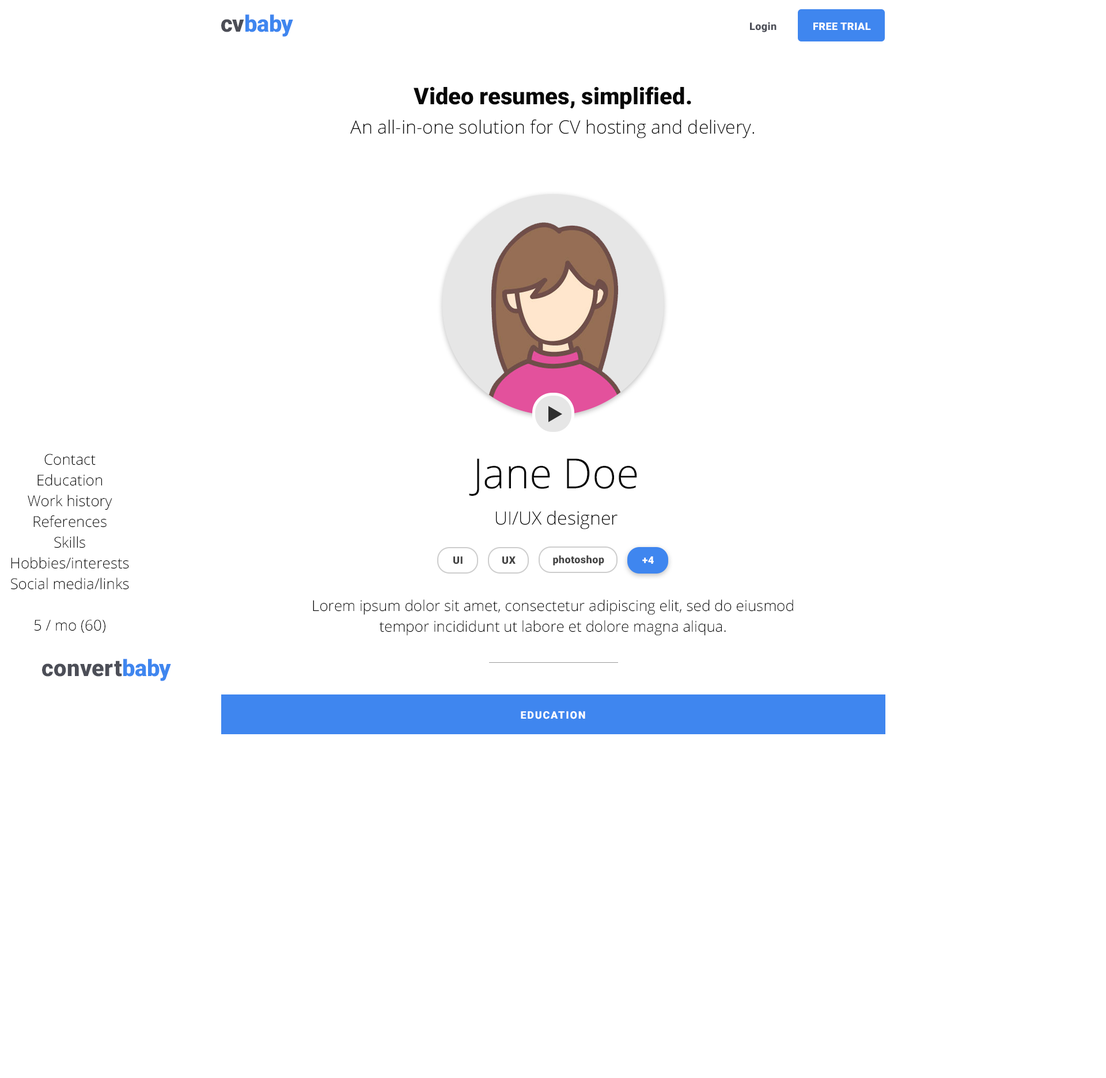
<style>
.page{position:relative;width:1106px;height:1078px;background:#ffffff}
.page>*{position:absolute;margin:0}
.t1{font:22.9px "Roboto-Black";letter-spacing:0.01em;color:#3f86ef}
.t2{font:22.9px "Roboto-Black";letter-spacing:0.01em;color:#4c4e57}
.t3{font:10.4px "Roboto-Black";letter-spacing:0.025em;color:#4c4e57}
.t4{font:10.4px "Roboto-Black";letter-spacing:0.025em;color:#ffffff}
.t5{font:23px "Roboto-Black";color:#070707}
.t6{font:18.4px "OpenSans-Light";color:#070707}
.t7{font:15px/20.7px "OpenSans-Light";color:#070707}
.t8{font:41.5px "OpenSans-Light";color:#070707}
.t9{font:10.4px "Roboto-Black";letter-spacing:0.025em;color:#444444}
.t10{font:10.4px "Roboto-Black";letter-spacing:0.1em;color:#ffffff;text-transform:uppercase}
</style>
<div class="page">
<p class="t1" style="left:221px;top:14px;width:72px;height:23px"><span class="t2">cv</span>baby</p>
<p class="t3" style="left:750px;top:22px;width:26px;height:10px">Login</p>
<p class="t4" style="left:813px;top:22px;width:58px;height:8px">FREE TRIAL</p>
<p class="t5" style="left:414px;top:86px;width:277px;height:23px">Video resumes, simplified.</p>
<p class="t6" style="left:350px;top:119px;width:404px;height:19px">An all-in-one solution for CV hosting and delivery.</p>
<p class="t7" style="left:11px;top:454px;width:118px;height:179px;text-align:center">Contact<br>Education<br>Work history<br>References<br>Skills<br>Hobbies/interests<br>Social media/links<br><br>5 / mo (60)</p>
<p class="t8" style="left:469px;top:458px;width:168px;height:38px">Jane Doe</p>
<p class="t6" style="left:496px;top:510px;width:121px;height:19px">UI/UX designer</p>
<p class="t9" style="left:453px;top:556px;width:10px;height:8px">UI</p>
<p class="t9" style="left:502px;top:556px;width:14px;height:8px">UX</p>
<p class="t9" style="left:553px;top:555px;width:51px;height:11px">photoshop</p>
<p class="t4" style="left:642px;top:556px;width:12px;height:8px">+4</p>
<p class="t7" style="left:313px;top:600px;width:480px;height:36px;text-align:center">Lorem ipsum dolor sit amet, consectetur adipiscing elit, sed do eiusmod tempor incididunt ut labore et dolore magna aliqua.</p>
<p class="t2" style="left:42px;top:659px;width:129px;height:22px">convert<span class="t1">baby</span></p>
<p class="t10" style="left:521px;top:711px;width:64px;height:8px">Education</p>
</div>
